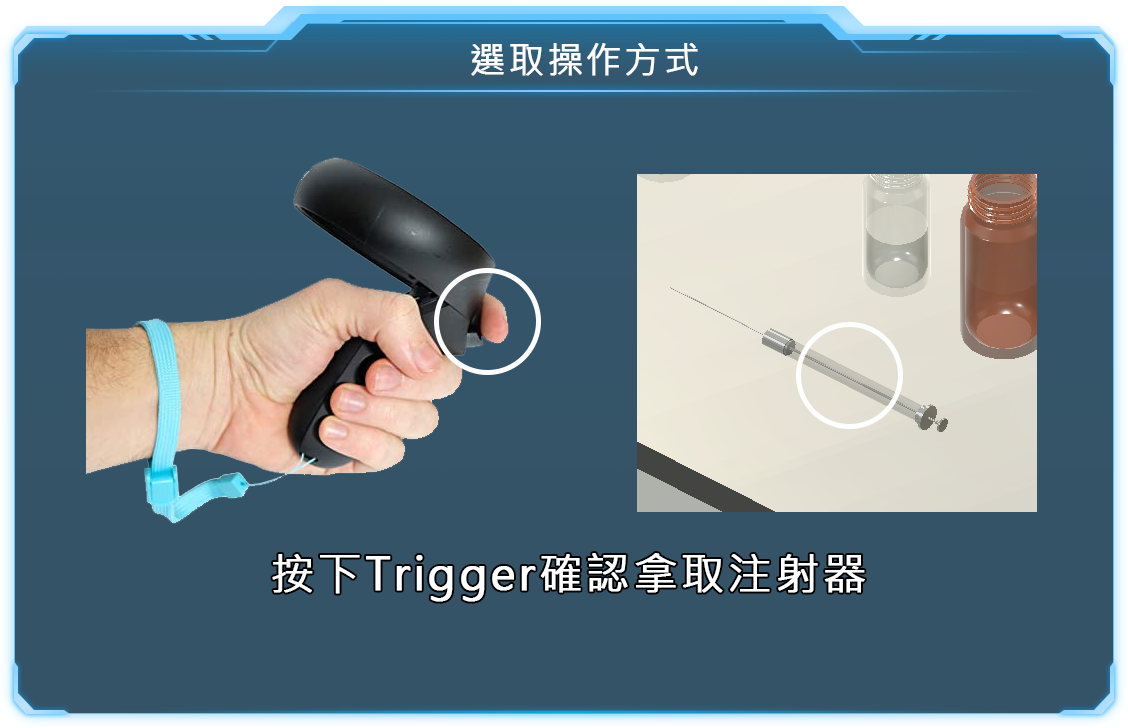
<style>
.page{position:relative;width:1128px;height:728px}
.page>*{position:absolute;margin:0}
.t1{font:36px "MicrosoftJhengHeiRegular";letter-spacing:0.05em;color:#ffffff;font-weight:bold}
.t2{font:44px "MicrosoftJhengHeiRegular";letter-spacing:0.05em;color:#ffffff;font-weight:bold}
</style>
<div class="page">
<p class="t1" style="left:471px;top:43px;width:227px;height:33px">選取操作方式</p>
<p class="t2" style="left:272px;top:553px;width:593px;height:49px">按下Trigger確認拿取注射器</p>
</div>
